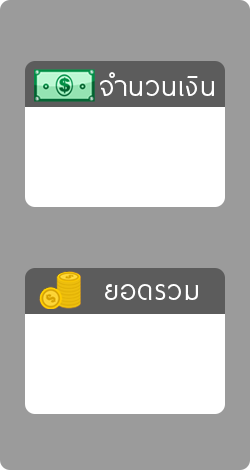
<style>
.page{position:relative;width:250px;height:470px;background:#9b9b9b}
.page>*{position:absolute;margin:0}
.t1{font:35px "ThaiSansLite";letter-spacing:0.03em;color:#ffffff}
</style>
<div class="page">
<p class="t1" style="left:100px;top:72px;width:114px;height:24px">จำนวนเงิน</p>
<p class="t1" style="left:105px;top:284px;width:93px;height:16px">ยอดรวม</p>
</div>
